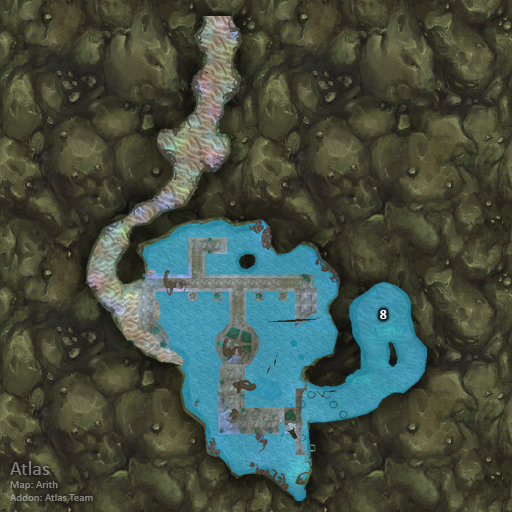
<style>
.page{position:relative;width:512px;height:512px}
.page>*{position:absolute;margin:0}
.t1{font:14px "Calibri-Bold";color:#ffffff}
.t2{font:11px "Calibri";color:#85847f}
.t3{font:20px "Calibri";color:#85847f}
</style>
<div class="page">
<p class="t1" style="left:380px;top:310px;width:7px;height:9px">8</p>
<p class="t2" style="left:10px;top:461px;width:83px;height:40px"><span class="t3">Atlas<br></span>Map: Arith<br>Addon: Atlas Team</p>
</div>
